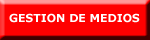
<style>
.page{position:relative;width:150px;height:40px;background:#ff0000}
.page>*{position:absolute;margin:0}
.t1{font:11px "Verdana-Bold";color:#ffffff}
</style>
<div class="page">
<p class="t1" style="left:9px;top:13px;width:131px;height:10px">GESTION DE MEDIOS</p>
</div>
